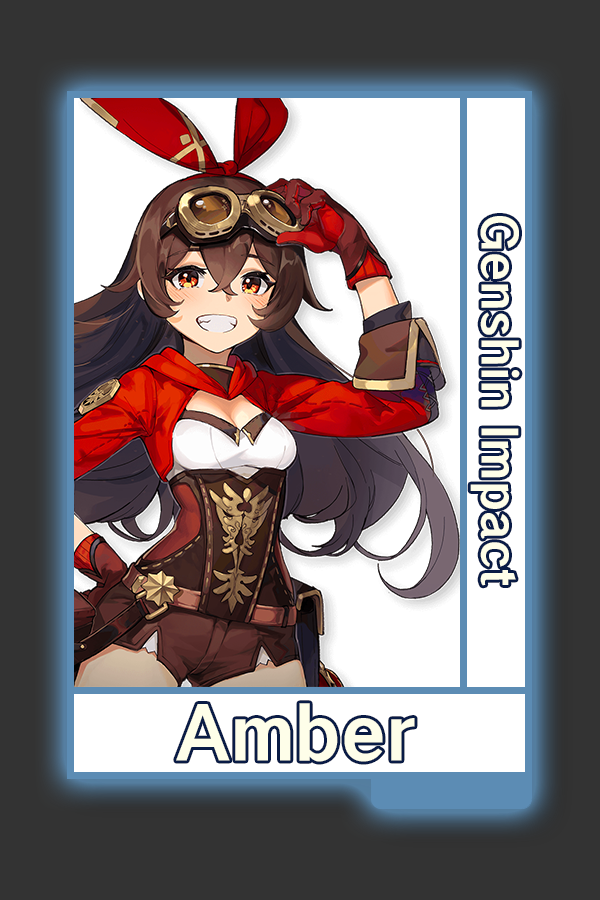
<style>
.page{position:relative;width:600px;height:900px;background:#333333}
.page>*{position:absolute;margin:0}
.t1{font:48.8px "HYWenHei-HEW";color:#fefef4}
.t2{font:75px "HYWenHei-HEW";color:#fefef4}
</style>
<div class="page">
<p class="t1" style="left:470px;top:216px;width:50px;height:370px;rotate:90deg">Genshin Impact</p>
<p class="t2" style="left:176px;top:703px;width:239px;height:59px">Amber</p>
</div>
